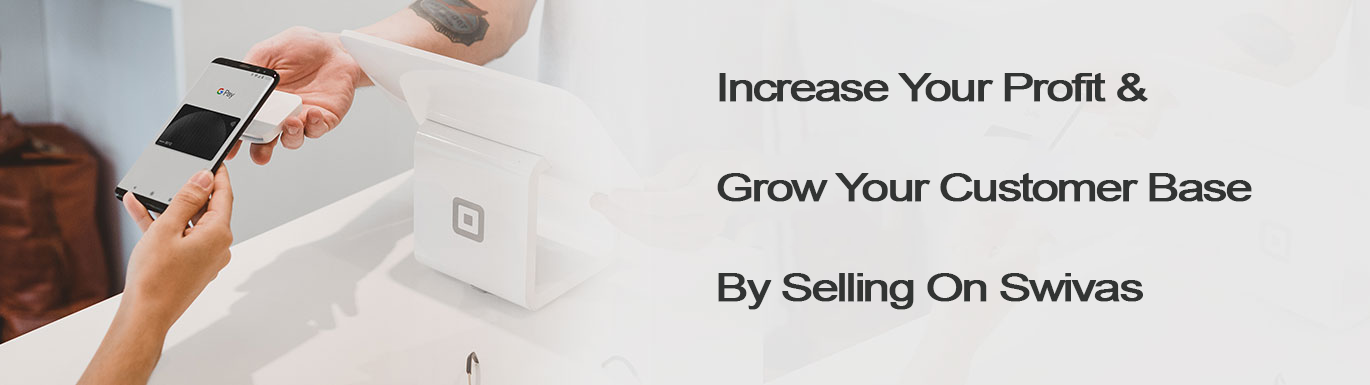
<style>
.page{position:relative;width:1370px;height:385px}
.page>*{position:absolute;margin:0}
.t1{font:38.9px/100px "ArialMT";letter-spacing:-0.07em;color:#323433;font-weight:bold;scale:1.27 1}
</style>
<div class="page">
<p class="t1" style="left:717px;top:73px;width:535px;height:237px;text-align:right">Increase Your Profit &amp; <br>Grow Your Customer Base <br>By Selling On Swivas</p>
</div>
